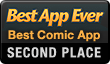
<style>
.page{position:relative;width:110px;height:64px}
.page>*{position:absolute;margin:0}
.t1{font:12px "HelveticaNeue-Bold";color:#feb84e}
.t2{font:14px/18.4px "HelveticaNeue-CondensedBold";letter-spacing:0.06em;color:#e2e2e2;text-transform:uppercase}
</style>
<div class="page">
<p class="t1" style="left:7px;top:30px;width:94px;height:28px;text-align:center">Best Comic App<br><span class="t2">Second Place</span></p>
</div>
